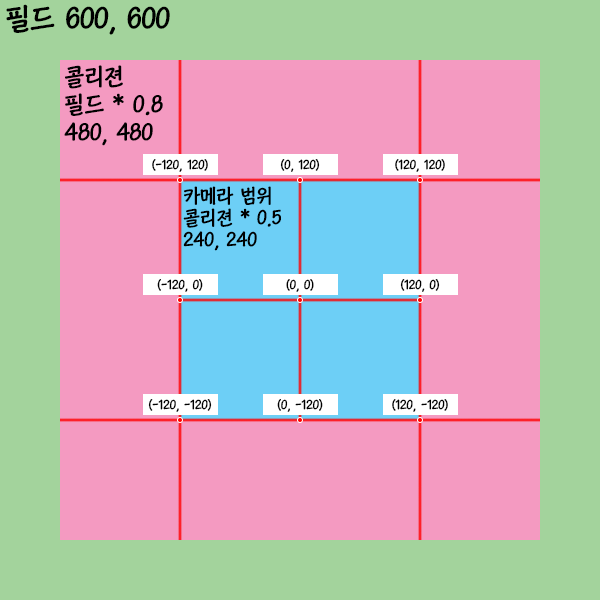
<style>
.page{position:relative;width:600px;height:600px;background:#f49ac1}
.page>*{position:absolute;margin:0}
.t1{font:30px "KoreanCNM-B";letter-spacing:-0.04em;color:#000000}
.t2{font:24px/28px "KoreanCNM-B";letter-spacing:-0.04em;color:#000000}
.t3{font:13px "KoreanCNM-B";letter-spacing:-0.04em;color:#000000}
.t4{font:20px/22px "KoreanCNM-B";letter-spacing:-0.04em;color:#000000}
</style>
<div class="page">
<p class="t1" style="left:6px;top:4px;width:164px;height:31px">필드 600, 600</p>
<p class="t2" style="left:64px;top:65px;width:99px;height:81px">콜리젼<br>필드 * 0.8 <br>480, 480</p>
<p class="t3" style="left:152px;top:159px;width:56px;height:13px">(-120, 120)</p>
<p class="t3" style="left:280px;top:159px;width:40px;height:13px">(0, 120)</p>
<p class="t3" style="left:395px;top:159px;width:50px;height:13px">(120, 120)</p>
<p class="t4" style="left:183px;top:186px;width:98px;height:65px">카메라 범위<br>콜리젼 * 0.5<br>240, 240</p>
<p class="t3" style="left:157px;top:279px;width:46px;height:13px">(-120, 0)</p>
<p class="t3" style="left:286px;top:279px;width:28px;height:13px">(0, 0)</p>
<p class="t3" style="left:400px;top:279px;width:40px;height:13px">(120, 0)</p>
<p class="t3" style="left:148px;top:399px;width:64px;height:13px">(-120, -120)</p>
<p class="t3" style="left:277px;top:399px;width:46px;height:13px">(0, -120)</p>
<p class="t3" style="left:392px;top:399px;width:56px;height:13px">(120, -120)</p>
</div>
